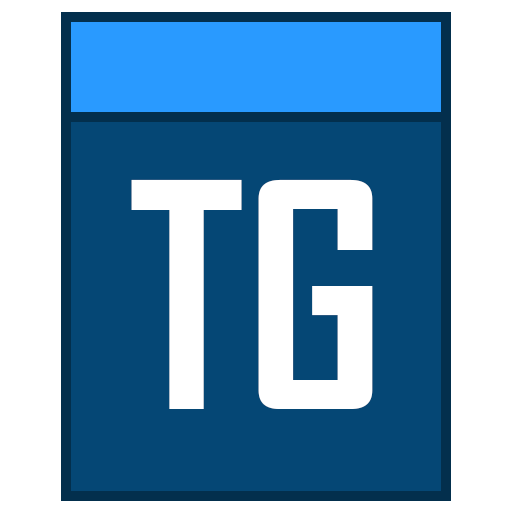
<style>
.page{position:relative;width:512px;height:512px;background:#054775}
.page>*{position:absolute;margin:0}
.t1{font:300.3px "AgencyFB-Bold";color:#ffffff}
</style>
<div class="page">
<p class="t1" style="left:131px;top:179px;width:242px;height:230px">TG</p>
</div>
